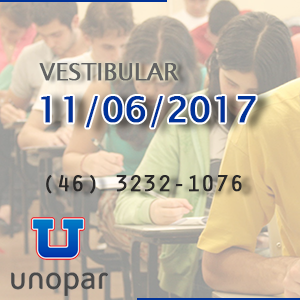
<style>
.page{position:relative;width:300px;height:300px}
.page>*{position:absolute;margin:0}
.t1{font:24px "LucidaSansUnicode";letter-spacing:-0.025em;color:#636363;font-weight:bold}
.t2{font:36px "LucidaSansUnicode";letter-spacing:-0.025em;color:#003399;font-weight:bold}
.t3{font:24px "OratorStd";letter-spacing:-0.025em;color:#292828;font-weight:bold}
</style>
<div class="page">
<p class="t1" style="left:39px;top:63px;width:140px;height:18px">VESTIBULAR</p>
<p class="t2" style="left:41px;top:96px;width:215px;height:32px">11/06/2017</p>
<p class="t3" style="left:46px;top:175px;width:196px;height:19px">(46) 3232-1076</p>
</div>
